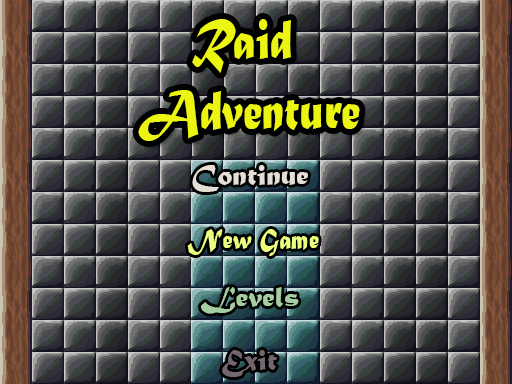
<style>
.page{position:relative;width:512px;height:384px}
.page>*{position:absolute;margin:0}
.t1{font:59.1px "MaturaMTScriptCapitals";color:#ecf412;scale:0.78 1}
.t2{font:30px "MaturaMTScriptCapitals";color:#e4dfd6}
.t3{font:29.4px "MaturaMTScriptCapitals";color:#ebff7e;scale:0.83 1}
.t4{font:30px "MaturaMTScriptCapitals";color:#a4cea0}
.t5{font:30px "MaturaMTScriptCapitals";color:#73666e}
</style>
<div class="page">
<p class="t1" style="left:138px;top:19px;width:222px;height:122px;text-align:center">Raid <br>Adventure</p>
<p class="t2" style="left:192px;top:165px;width:116px;height:27px">Continue</p>
<p class="t3" style="left:187px;top:229px;width:132px;height:27px">New Game</p>
<p class="t4" style="left:201px;top:287px;width:98px;height:27px">Levels</p>
<p class="t5" style="left:222px;top:350px;width:55px;height:27px">Exit</p>
</div>
